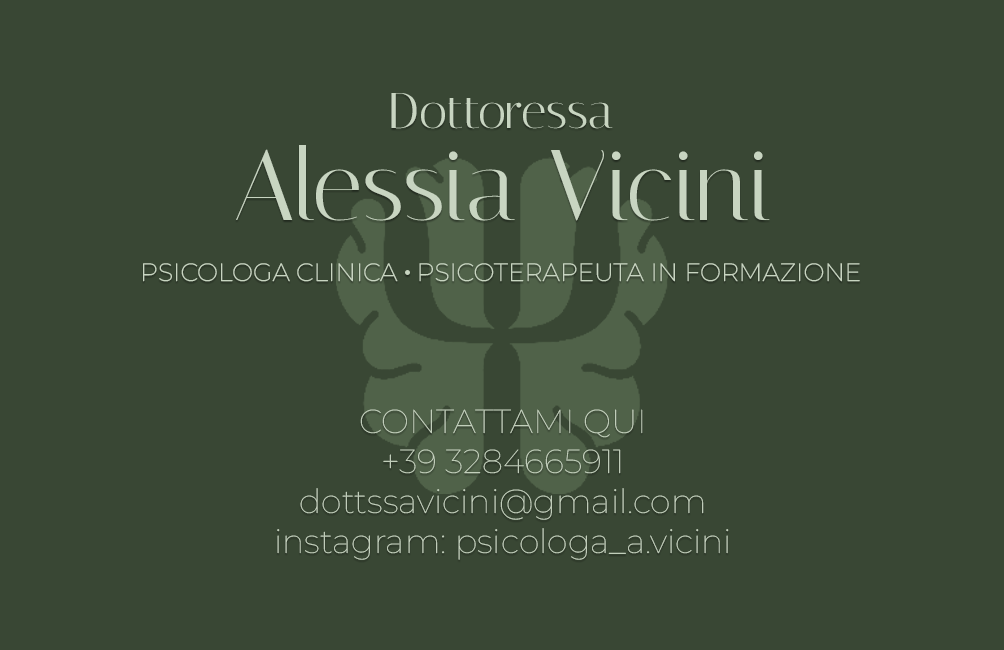
<style>
.page{position:relative;width:1004px;height:650px;background:#394734}
.page>*{position:absolute;margin:0}
.t1{font:50px "Italiana-Regular";color:#c8d5c1}
.t2{font:100px "Italiana-Regular";color:#c8d5c1}
.t3{font:25px "Montserrat-ExtraLight";color:#c8d5c1}
.t4{font:33.3px "Montserrat-Thin";color:#c8d5c1}
</style>
<div class="page">
<p class="t1" style="left:391px;top:93px;width:222px;height:36px">Dottoressa</p>
<p class="t2" style="left:236px;top:145px;width:534px;height:76px">Alessia Vicini</p>
<p class="t3" style="left:143px;top:263px;width:717px;height:19px">PSICOLOGA CLINICA   PSICOTERAPEUTA IN FORMAZIONE</p>
<p class="t4" style="left:277px;top:409px;width:452px;height:151px;text-align:center">CONTATTAMI QUI<br>+39 3284665911<br>dottssavicini@gmail.com<br>instagram: psicologa_a.vicini</p>
</div>
